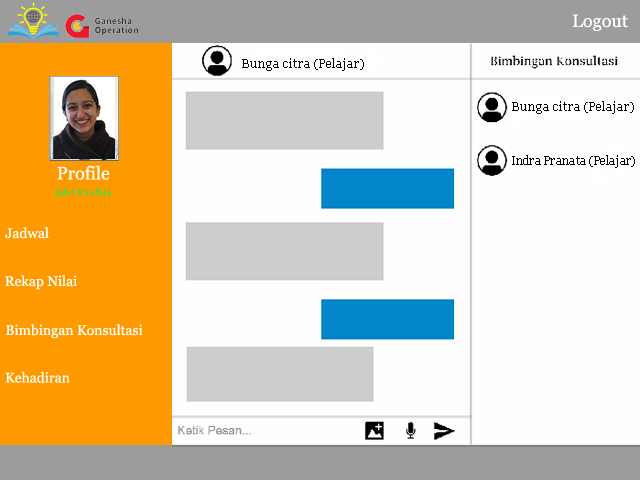
<style>
.page{position:relative;width:640px;height:480px;background:#fefefe}
.page>*{position:absolute;margin:0}
.t1{font:18px "Georgia";color:#ffffff}
.t2{font:12px "Georgia";color:#000000}
.t3{font:12px "Georgia";color:#000000;scale:0.91 1}
.t4{font:10px "Georgia";color:#34e340}
.t5{font:14px "Georgia";color:#ffffff}
</style>
<div class="page">
<p class="t1" style="left:572px;top:14px;width:56px;height:17px">Logout</p>
<p class="t2" style="left:242px;top:58px;width:122px;height:13px">Bunga citra (Pelajar)</p>
<p class="t2" style="left:512px;top:101px;width:122px;height:13px">Bunga citra (Pelajar)</p>
<p class="t3" style="left:512px;top:155px;width:123px;height:13px">Indra Pranata (Pelajar)</p>
<p class="t1" style="left:57px;top:165px;width:53px;height:15px">Profile</p>
<p class="t4" style="left:55px;top:188px;width:56px;height:8px">Edit Profile</p>
<p class="t5" style="left:5px;top:227px;width:44px;height:12px">Jadwal</p>
<p class="t5" style="left:5px;top:275px;width:72px;height:15px">Rekap Nilai</p>
<p class="t5" style="left:5px;top:324px;width:138px;height:15px">Bimbingan Konsultasi</p>
<p class="t5" style="left:5px;top:371px;width:65px;height:12px">Kehadiran</p>
</div>
